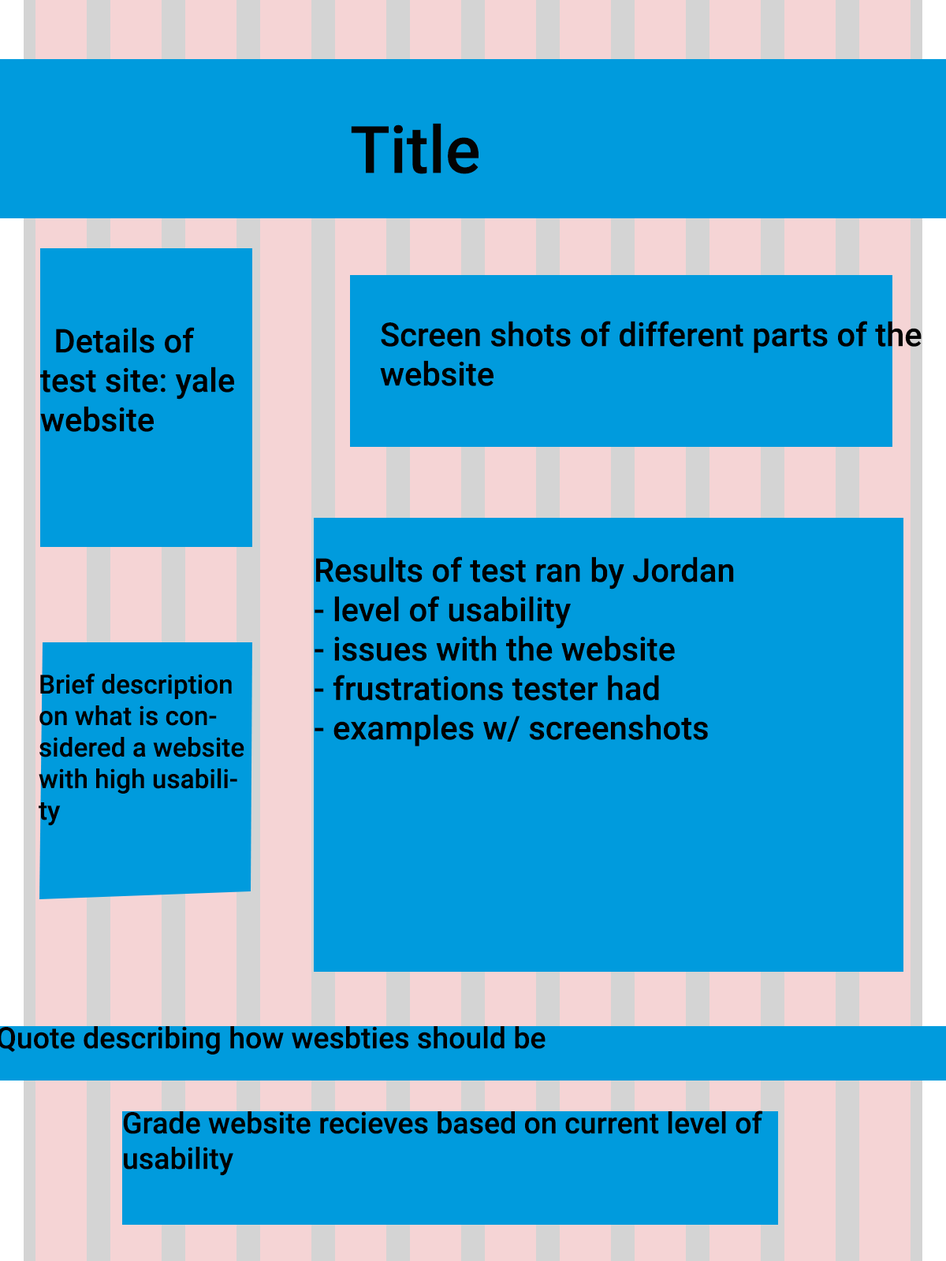
<style>
.page{position:relative;width:946px;height:1261px;background:#009bdd}
.page>*{position:absolute;margin:0}
.t1{font:65.7px "Roboto-Medium";color:#030303}
.t2{font:32.8px "Roboto-Medium";color:#000000}
.t3{font:32.8px "Roboto-Medium";color:#009bdd}
.t4{font:26.3px "Roboto-Medium";color:#000000}
.t5{font:26.3px "Roboto-Medium";color:#009bdd}
.t6{font:29.6px "Roboto-Medium";color:#000000}
</style>
<div class="page">
<p class="t1" style="left:351px;top:123px;width:127px;height:51px">Title</p>
<p class="t2" style="left:40px;top:327px;width:194px;height:105px"><span class="t3"><br>\</span>Details of test site: yale website</p>
<p class="t2" style="left:380px;top:321px;width:541px;height:65px"><span class="t3"><br></span>Screen shots of different parts of the website</p>
<p class="t2" style="left:314px;top:556px;width:420px;height:190px"><span class="t3"><br></span>Results of test ran by Jordan<br>- level of usability<br>- issues with the website<br>- frustrations tester had<br>- examples w/ screenshots</p>
<p class="t4" style="left:39px;top:673px;width:205px;height:153px"><span class="t5"><br></span>Brief description on what is considered a website with high usability</p>
<p class="t6" style="left:123px;top:1110px;width:639px;height:66px">Grade website recieves based on current level of usability</p>
</div>
